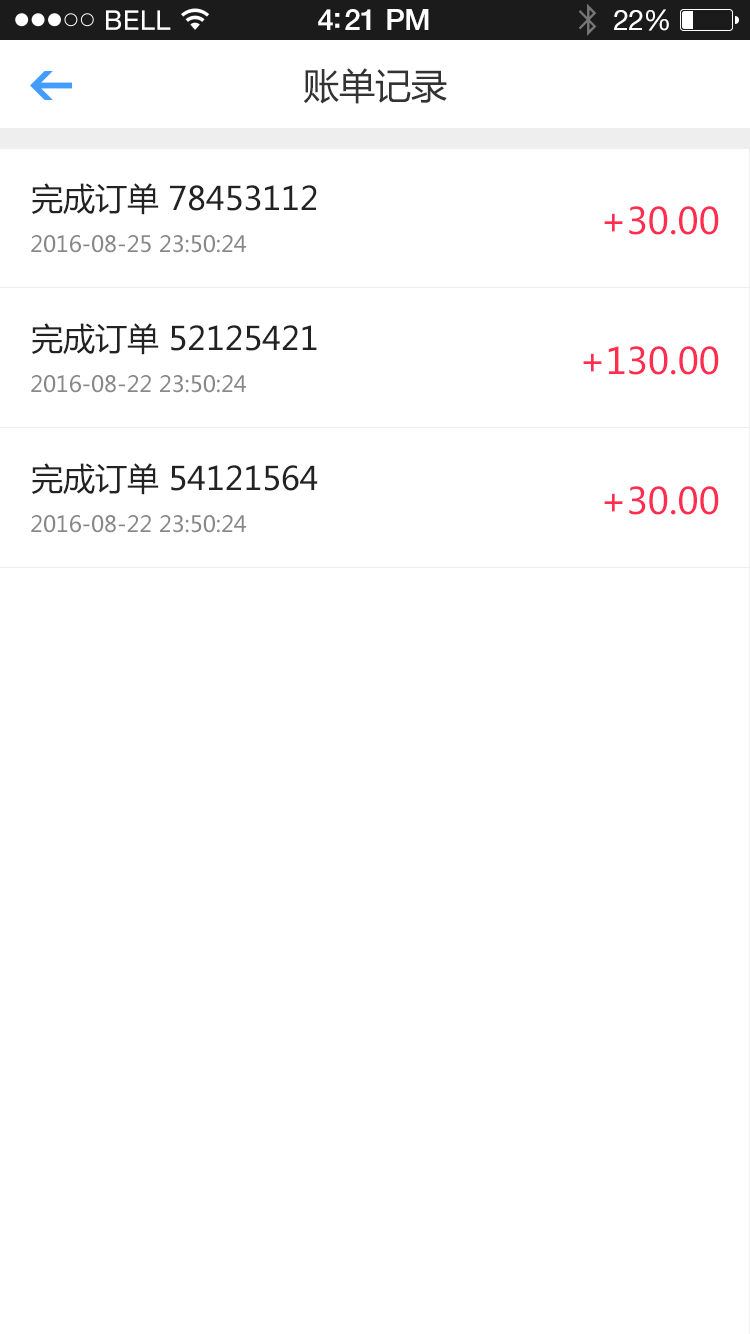
<style>
.page{position:relative;width:750px;height:1334px;background:#ffffff}
.page>*{position:absolute;margin:0}
.t1{font:36px "MicrosoftYaHei";color:#333333}
.t2{font:32px "MicrosoftYaHei";color:#222222}
.t3{font:36px "MicrosoftYaHei";color:#ff2e50}
.t4{font:22px "MicrosoftYaHei";color:#888888}
</style>
<div class="page">
<p class="t1" style="left:303px;top:68px;width:144px;height:36px">账单记录</p>
<p class="t2" style="left:31px;top:183px;width:286px;height:32px">完成订单 78453112</p>
<p class="t3" style="left:604px;top:206px;width:115px;height:29px">+30.00</p>
<p class="t4" style="left:31px;top:235px;width:215px;height:18px">2016-08-25 23:50:24</p>
<p class="t2" style="left:31px;top:323px;width:286px;height:32px">完成订单 52125421</p>
<p class="t3" style="left:583px;top:346px;width:136px;height:29px">+130.00</p>
<p class="t4" style="left:31px;top:375px;width:215px;height:18px">2016-08-22 23:50:24</p>
<p class="t2" style="left:31px;top:463px;width:287px;height:32px">完成订单 54121564</p>
<p class="t3" style="left:604px;top:486px;width:115px;height:29px">+30.00</p>
<p class="t4" style="left:31px;top:515px;width:215px;height:18px">2016-08-22 23:50:24</p>
</div>
